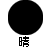
<style>
.page{position:relative;width:50px;height:48px;background:#ffffff}
.page>*{position:absolute;margin:0}
.t1{font:12px "OPPOSans-R";color:#000000}
</style>
<div class="page">
<p class="t1" style="left:19px;top:36px;width:10px;height:11px">晴</p>
</div>
